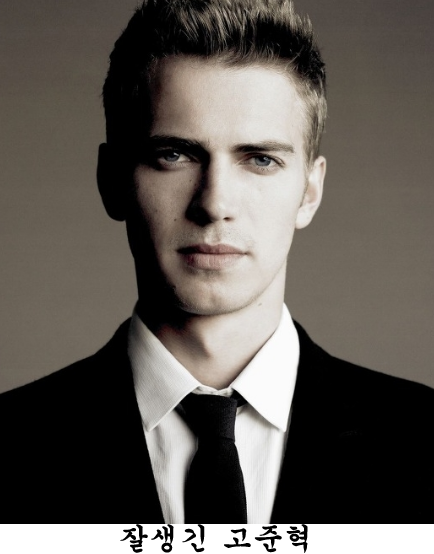
<style>
.page{position:relative;width:434px;height:554px;background:#000000}
.page>*{position:absolute;margin:0}
.t1{font:30px "H2gsrB";color:#000000;font-weight:bold}
</style>
<div class="page">
<p class="t1" style="left:120px;top:524px;width:188px;height:29px">잘생긴 고준혁</p>
</div>
